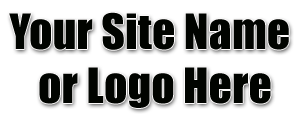
<style>
.page{position:relative;width:304px;height:124px;background:#ffffff}
.page>*{position:absolute;margin:0}
.t1{font:45px "Impact";letter-spacing:0.01em;color:#010400}
</style>
<div class="page">
<p class="t1" style="left:9px;top:12px;width:280px;height:96px;text-align:center">Your Site Name <br>or Logo Here</p>
</div>
